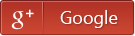
<style>
.page{position:relative;width:135px;height:36px}
.page>*{position:absolute;margin:0}
.t1{font:18px "SegoeUI";color:#ffffff}
</style>
<div class="page">
<p class="t1" style="left:60px;top:10px;width:58px;height:18px">Google</p>
</div>
